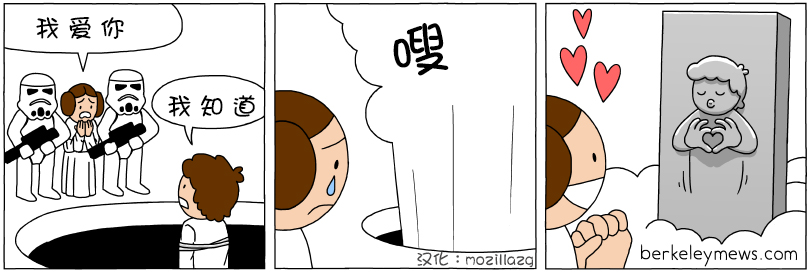
<style>
.page{position:relative;width:810px;height:273px;background:#ffffff}
.page>*{position:absolute;margin:0}
.t1{font:25px "DFGirl";letter-spacing:0.3em;color:#010101}
.t2{font:58.3px "DFGirl";letter-spacing:0.3em;color:#000000}
.t3{font:25px "DFGirl";letter-spacing:0.3em;color:#000000}
.t4{font:16.7px "DFGirl";color:#4a4949}
</style>
<div class="page">
<p class="t1" style="left:36px;top:17px;width:88px;height:22px">我爱你</p>
<p class="t2" style="left:393px;top:23px;width:56px;height:53px;rotate:-12deg">嗖</p>
<p class="t3" style="left:168px;top:95px;width:87px;height:22px">我知道</p>
<p class="t4" style="left:417px;top:251px;width:116px;height:17px">汉化：mozillazg</p>
</div>
